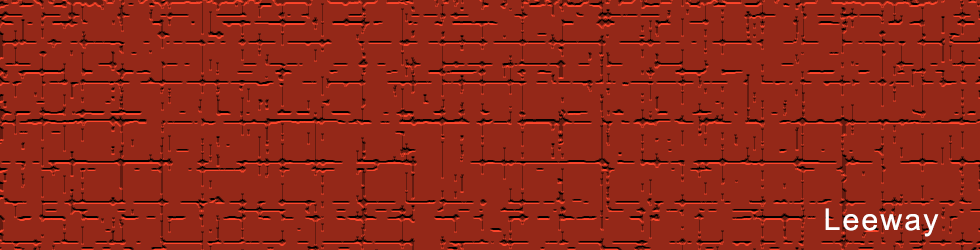
<style>
.page{position:relative;width:980px;height:250px;background:#942818}
.page>*{position:absolute;margin:0}
.t1{font:30px "ArialMT";letter-spacing:0.075em;color:#ffffff}
</style>
<div class="page">
<p class="t1" style="left:825px;top:208px;width:114px;height:29px">Leeway</p>
</div>
